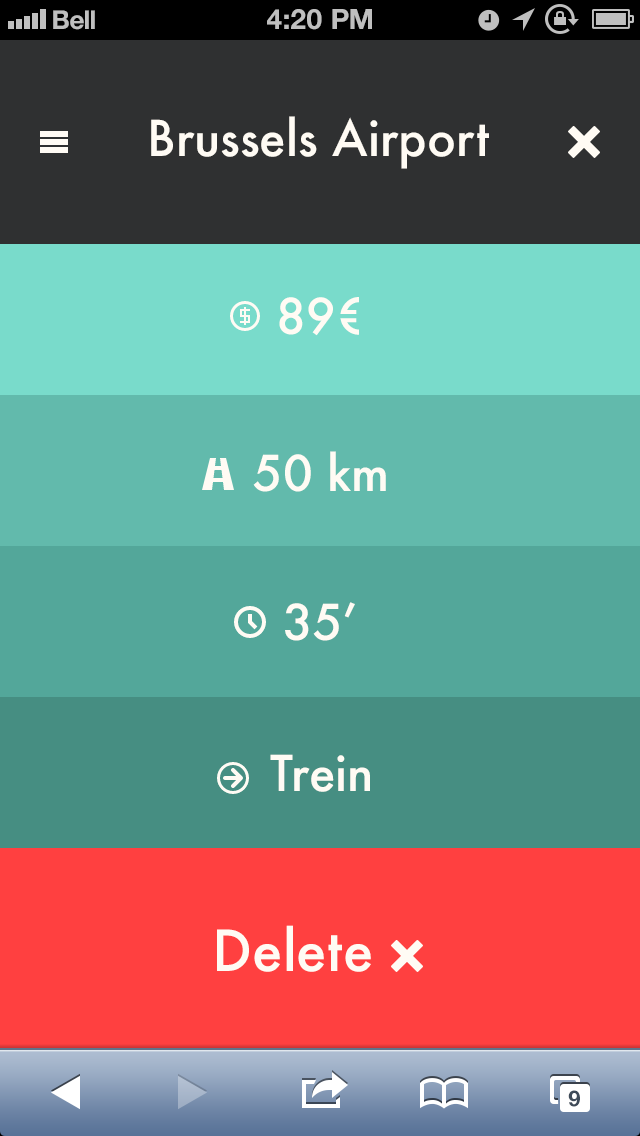
<style>
.page{position:relative;width:640px;height:1136px}
.page>*{position:absolute;margin:0}
.t1{font:26px "HelveticaNeue-Bold";color:#bfbfbf}
.t2{font:28px "HelveticaNeue-Bold";color:#bfbfbf;text-transform:uppercase}
.t3{font:48px "Futura-Medium";color:#fffbf4}
.t4{font:55px "Futura-Medium";color:#fffbf4}
.t5{font:22px "HelveticaNeue-Bold";color:#3e4a58}
</style>
<div class="page">
<p class="t1" style="left:53px;top:10px;width:42px;height:20px">Bell</p>
<p class="t2" style="left:267px;top:9px;width:105px;height:21px">4:20 PM</p>
<p class="t3" style="left:151px;top:116px;width:338px;height:53px">Brussels Airport</p>
<p class="t3" style="left:279px;top:297px;width:80px;height:39px">89€</p>
<p class="t3" style="left:253px;top:451px;width:133px;height:41px">50 km</p>
<p class="t3" style="left:285px;top:602px;width:70px;height:39px">35’</p>
<p class="t3" style="left:270px;top:754px;width:100px;height:38px">Trein</p>
<p class="t4" style="left:217px;top:925px;width:154px;height:47px">Delete</p>
<p class="t5" style="left:568px;top:1090px;width:12px;height:17px">9</p>
</div>
